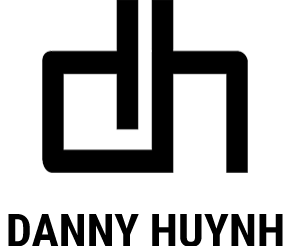
<style>
.page{position:relative;width:293px;height:246px;background:#ffffff}
.page>*{position:absolute;margin:0}
.t1{font:45.8px "RobotoCondensed-Bold";color:#000000}
</style>
<div class="page">
<p class="t1" style="left:8px;top:214px;width:275px;height:33px">DANNY HUYNH</p>
</div>
